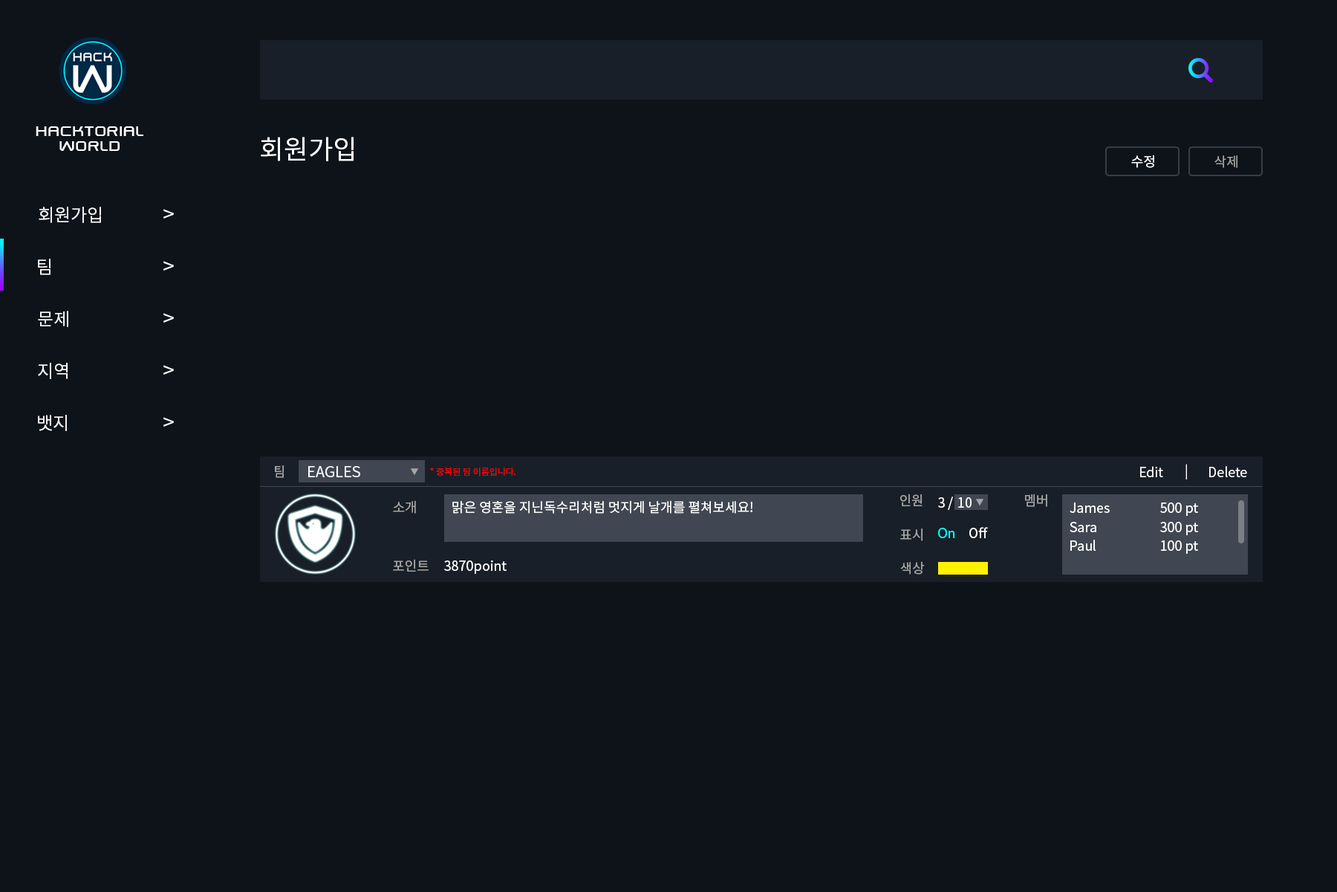
<style>
.page{position:relative;width:1337px;height:892px;background:#0e131a}
.page>*{position:absolute;margin:0}
.t1{font:17.8px/14.9px "SwiszRegular";color:#ffffff}
.t2{font:26.7px "NotoSansCJKkr-Regular";color:#ffffff}
.t3{font:13.4px "NotoSansCJKkr-Regular";color:#ffffff}
.t4{font:13.4px "NotoSansCJKkr-Regular";color:#a3a3a3}
.t5{font:17.8px "NotoSansCJKkr-Regular";color:#ffffff}
.t6{font:20.8px "NotoSansCJKkr-Regular";color:#ffffff}
.t7{font:13.4px "NotoSansCJKkr-Regular";color:#a6a6a6}
.t8{font:14.9px "NotoSansCJKkr-Regular";color:#ffffff}
.t9{font:7.4px "NotoSansCJKkr-Regular";color:#a6a6a6}
.t10{font:8.9px "NotoSansCJKkr-Regular";color:#ff0000}
.t11{font:13.4px "NotoSansCJKkr-DemiLight";color:#ffffff}
.t12{font:13.4px "NotoSansCJKkr-Regular";color:#00ffff}
</style>
<div class="page">
<p class="t1" style="left:36px;top:126px;width:107px;height:25px;text-align:center">hacktorial<br>world</p>
<p class="t2" style="left:261px;top:137px;width:93px;height:24px">회원가입</p>
<p class="t3" style="left:1132px;top:155px;width:23px;height:13px">수정</p>
<p class="t4" style="left:1215px;top:155px;width:23px;height:13px">삭제</p>
<p class="t5" style="left:39px;top:207px;width:62px;height:16px">회원가입</p>
<p class="t6" style="left:163px;top:209px;width:11px;height:9px">&gt;</p>
<p class="t5" style="left:38px;top:259px;width:13px;height:16px">팀</p>
<p class="t6" style="left:163px;top:261px;width:11px;height:9px">&gt;</p>
<p class="t5" style="left:38px;top:311px;width:30px;height:16px">문제</p>
<p class="t6" style="left:163px;top:313px;width:11px;height:9px">&gt;</p>
<p class="t5" style="left:38px;top:363px;width:30px;height:16px">지역</p>
<p class="t6" style="left:163px;top:365px;width:11px;height:9px">&gt;</p>
<p class="t5" style="left:38px;top:415px;width:29px;height:16px">뱃지</p>
<p class="t6" style="left:163px;top:417px;width:11px;height:9px">&gt;</p>
<p class="t7" style="left:275px;top:465px;width:9px;height:13px">팀</p>
<p class="t8" style="left:308px;top:466px;width:52px;height:11px">EAGLES</p>
<p class="t9" style="left:411px;top:468px;width:7px;height:7px">▼</p>
<p class="t10" style="left:430px;top:467px;width:86px;height:9px">* 중복된 팀 이름입니다.</p>
<p class="t11" style="left:1141px;top:466px;width:23px;height:11px">Edit</p>
<p class="t11" style="left:1186px;top:464px;width:1px;height:15px">|</p>
<p class="t11" style="left:1210px;top:466px;width:38px;height:11px">Delete</p>
<p class="t7" style="left:901px;top:493px;width:22px;height:13px">인원</p>
<p class="t3" style="left:938px;top:496px;width:15px;height:14px">3 /</p>
<p class="t3" style="left:958px;top:497px;width:14px;height:10px">10</p>
<p class="t7" style="left:1025px;top:493px;width:23px;height:14px">멤버</p>
<p class="t7" style="left:393px;top:500px;width:23px;height:13px">소개</p>
<p class="t3" style="left:452px;top:500px;width:301px;height:13px">맑은 영혼을 지닌독수리처럼 멋지게 날개를 펼쳐보세요!</p>
<p class="t9" style="left:976px;top:499px;width:8px;height:6px">▼</p>
<p class="t3" style="left:1070px;top:502px;width:40px;height:11px">James</p>
<p class="t3" style="left:1161px;top:502px;width:37px;height:14px">500 pt</p>
<p class="t3" style="left:1070px;top:522px;width:27px;height:10px">Sara</p>
<p class="t3" style="left:1161px;top:522px;width:37px;height:13px">300 pt</p>
<p class="t7" style="left:901px;top:528px;width:22px;height:13px">표시</p>
<p class="t12" style="left:938px;top:528px;width:17px;height:10px">On</p>
<p class="t3" style="left:970px;top:527px;width:18px;height:11px">Off</p>
<p class="t3" style="left:1071px;top:539px;width:25px;height:12px">Paul</p>
<p class="t3" style="left:1161px;top:540px;width:37px;height:14px">100 pt</p>
<p class="t7" style="left:393px;top:559px;width:36px;height:12px">포인트</p>
<p class="t3" style="left:444px;top:560px;width:63px;height:14px">3870point</p>
<p class="t7" style="left:901px;top:561px;width:24px;height:13px">색상</p>
</div>
